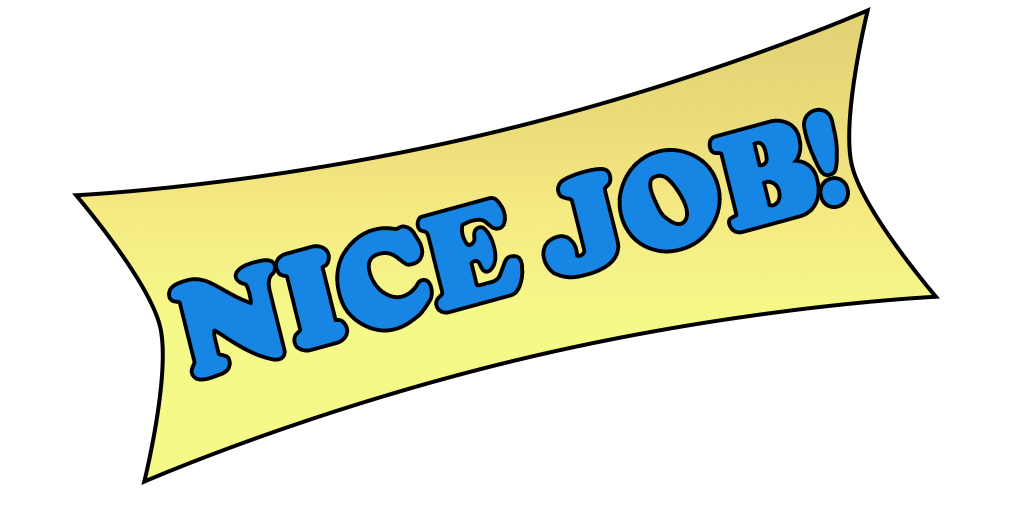
<style>
.page{position:relative;width:1024px;height:512px;background:#ffffff}
.page>*{position:absolute;margin:0}
.t1{font:118.1px "Coolsville";color:#1685e3;scale:0.95 1}
</style>
<div class="page">
<p class="t1" style="left:171px;top:111px;width:675px;height:267px;rotate:-15deg">NICE JOB!</p>
</div>
